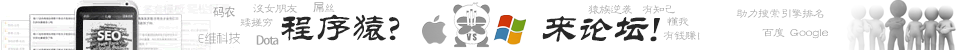
<style>
.page{position:relative;width:960px;height:50px;background:#ffffff}
.page>*{position:absolute;margin:0}
.t1{font:12px "AdobeHeitiStd-Regular";letter-spacing:-0.08em;color:#a4a4a4}
.t2{font:12px "JXiaoLiSu";letter-spacing:-0.08em;color:#a4a4a4}
.t3{font:36px "FZL2JW--GB1-0";color:#272727}
.t4{font:36px "FZL2JW--GB1-0";color:#272727;font-style:italic}
.t5{font:12px "JXiaoLiSu";letter-spacing:-0.08em}
.t6{font:12px "JXiaoLiSu";color:#a4a4a4}
.t7{font:12px "RTWSYueGoTrial-ExLight"}
</style>
<div class="page">
<p class="t1" style="left:213px;top:6px;width:22px;height:12px">码农</p>
<p class="t2" style="left:253px;top:4px;width:45px;height:9px">没女朋友</p>
<p class="t1" style="left:313px;top:2px;width:22px;height:11px">屌<span class="t2">丝</span></p>
<p class="t2" style="left:588px;top:5px;width:44px;height:9px">猿族逆袭</p>
<p class="t2" style="left:642px;top:5px;width:33px;height:9px">有知己</p>
<p class="t3" style="left:281px;top:14px;width:119px;height:27px">程序猿?</p>
<p class="t4" style="left:542px;top:16px;width:118px;height:26px">来论坛!</p>
<p class="t2" style="left:667px;top:17px;width:22px;height:9px">懂我</p>
<p class="t2" style="left:736px;top:9px;width:88px;height:9px">助力搜索引擎排名</p>
<p class="t5" style="left:240px;top:18px;width:33px;height:9px">矮搓穷</p>
<p class="t2" style="left:762px;top:28px;width:23px;height:9px">百度</p>
<p class="t6" style="left:790px;top:29px;width:38px;height:10px">Google</p>
<p class="t7" style="left:198px;top:32px;width:42px;height:12px">E维科技</p>
<p class="t1" style="left:256px;top:35px;width:23px;height:10px">Dota</p>
<p class="t5" style="left:663px;top:31px;width:37px;height:9px">有钱赚!</p>
</div>
